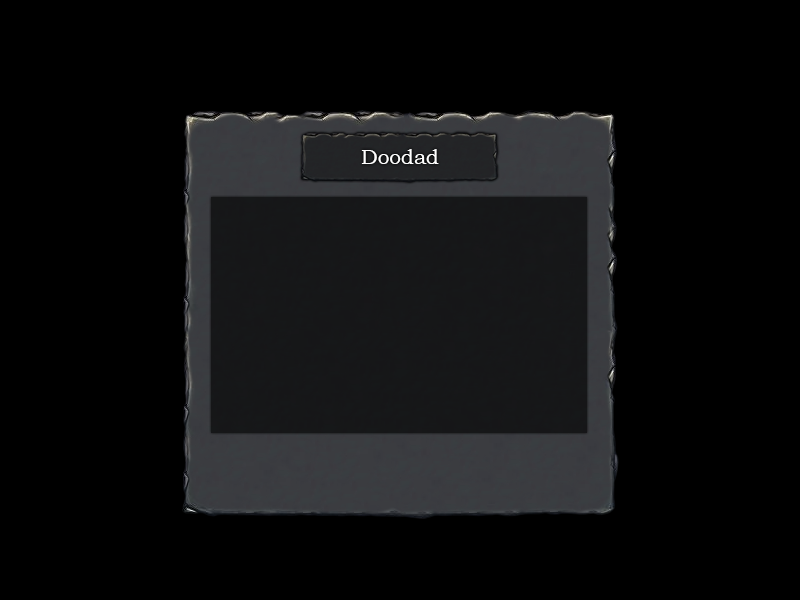
<style>
.page{position:relative;width:800px;height:600px;background:#000000}
.page>*{position:absolute;margin:0}
.t1{font:20.8px "BookmanOldStyle";color:#ffffff}
</style>
<div class="page">
<p class="t1" style="left:361px;top:149px;width:78px;height:15px">Doodad</p>
</div>
